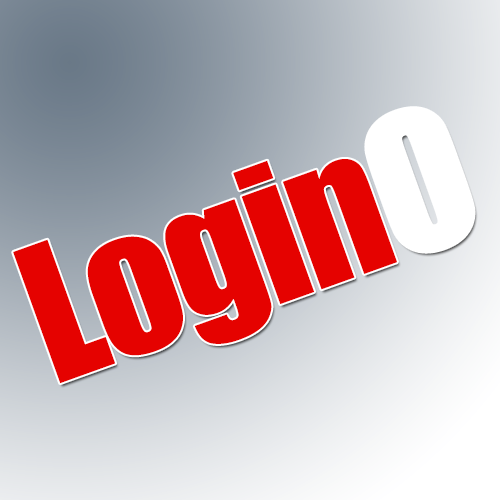
<style>
.page{position:relative;width:500px;height:500px}
.page>*{position:absolute;margin:0}
.t1{font:175.9px "Impact";letter-spacing:-0.025em;color:#e50200}
.t2{font:175.9px "Impact";letter-spacing:-0.025em;color:#ffffff}
</style>
<div class="page">
<p class="t1" style="left:13px;top:108px;width:461px;height:276px;rotate:-20deg">Login<span class="t2">O</span></p>
</div>
